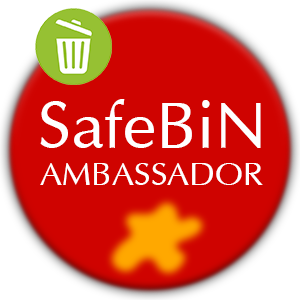
<style>
.page{position:relative;width:300px;height:300px;background:#cf0300}
.page>*{position:absolute;margin:0}
.t1{font:66.7px "Ace";color:#ffffff}
.t2{font:33.3px "Ace";color:#ffffff}
</style>
<div class="page">
<p class="t1" style="left:40px;top:99px;width:221px;height:49px">SafeBiN</p>
<p class="t2" style="left:40px;top:163px;width:223px;height:22px">AMBASSADOR</p>
</div>
